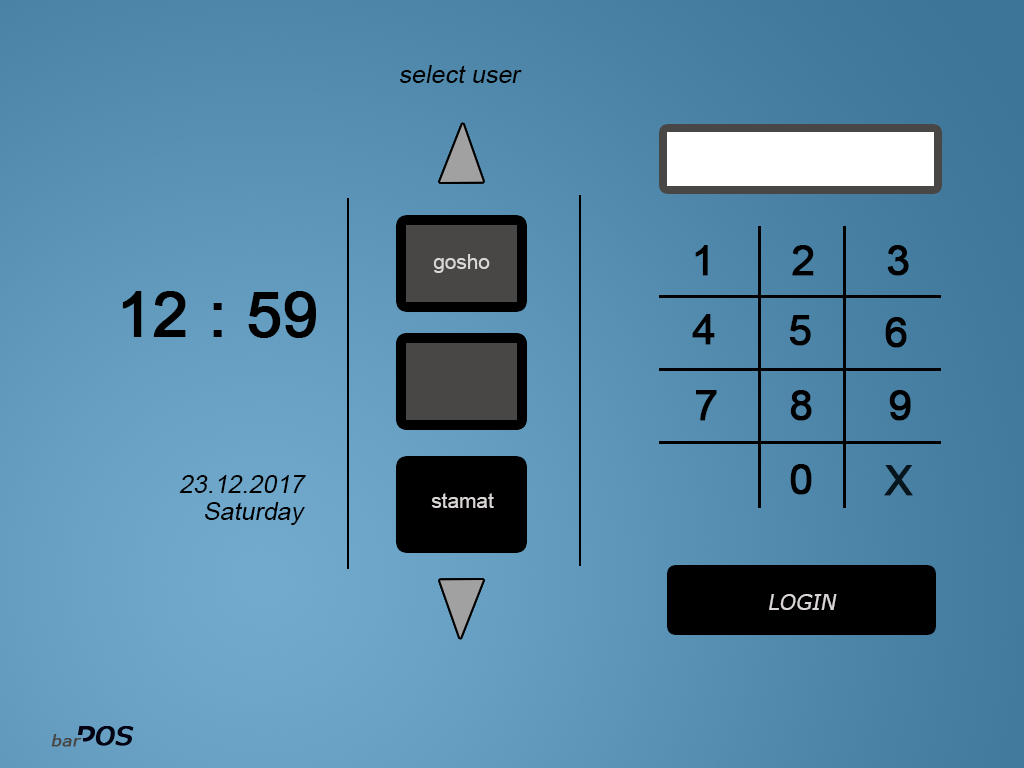
<style>
.page{position:relative;width:1024px;height:768px}
.page>*{position:absolute;margin:0}
.t1{font:25px "ArialMT";color:#000000;font-style:italic}
.t2{font:41.7px "ArialMT";color:#000000;font-weight:bold}
.t3{font:20.8px "ArialMT";color:#dcd7d7}
.t4{font:62.5px "ArialMT";color:#000000;font-weight:bold}
.t5{font:41.7px "ArialMT";color:#07151d;font-weight:bold}
.t6{font:20.8px "ArialMT";color:#dbd6d6}
.t7{font:20.8px "Verdana";color:#dbd6d6;font-style:italic}
.t8{font:25px "Verdana";color:#030213;font-weight:bold;font-style:italic}
.t9{font:15px "Verdana";color:#494646;font-weight:bold;font-style:italic;scale:1.11 1}
</style>
<div class="page">
<p class="t1" style="left:399px;top:65px;width:123px;height:18px">select user</p>
<p class="t2" style="left:695px;top:245px;width:13px;height:31px">1</p>
<p class="t2" style="left:792px;top:245px;width:22px;height:31px">2</p>
<p class="t2" style="left:887px;top:245px;width:22px;height:31px">3</p>
<p class="t3" style="left:433px;top:254px;width:57px;height:19px">gosho</p>
<p class="t4" style="left:122px;top:291px;width:194px;height:47px">12 : 59</p>
<p class="t2" style="left:692px;top:314px;width:23px;height:31px">4</p>
<p class="t2" style="left:789px;top:315px;width:22px;height:31px">5</p>
<p class="t2" style="left:885px;top:317px;width:22px;height:31px">6</p>
<p class="t2" style="left:696px;top:390px;width:21px;height:31px">7</p>
<p class="t2" style="left:790px;top:390px;width:22px;height:31px">8</p>
<p class="t2" style="left:889px;top:390px;width:22px;height:31px">9</p>
<p class="t2" style="left:790px;top:464px;width:22px;height:31px">0</p>
<p class="t5" style="left:884px;top:465px;width:29px;height:31px">X</p>
<p class="t1" style="left:179px;top:475px;width:127px;height:18px">23.12.2017</p>
<p class="t6" style="left:431px;top:493px;width:63px;height:15px">stamat</p>
<p class="t1" style="left:205px;top:502px;width:100px;height:23px">Saturday</p>
<p class="t7" style="left:769px;top:594px;width:68px;height:16px">LOGIN</p>
<p class="t8" style="left:95px;top:726px;width:38px;height:20px">OS</p>
<p class="t8" style="left:96px;top:726px;width:38px;height:20px">OS</p>
<p class="t9" style="left:51px;top:734px;width:31px;height:13px">bar</p>
</div>
